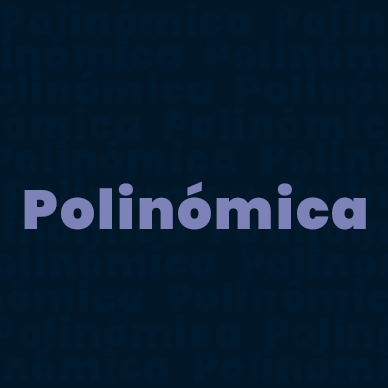
<style>
.page{position:relative;width:388px;height:388px;background:#011627}
.page>*{position:absolute;margin:0}
.t1{font:40px "Poppins-Black";letter-spacing:0.04em;color:#00192d}
.t2{font:55px "Poppins-Black";letter-spacing:0.04em;color:#7d82b8}
</style>
<div class="page">
<p class="t1" style="left:2px;top:0px;width:249px;height:36px">Polinómica</p>
<p class="t2" style="left:24px;top:181px;width:342px;height:49px">Polinómica</p>
</div>
